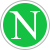
<style>
.page{position:relative;width:50px;height:50px;background:#15c142}
.page>*{position:absolute;margin:0}
.t1{font:41.7px "TimesNewRomanPSMT";letter-spacing:-0.01em;color:#ffffff}
</style>
<div class="page">
<p class="t1" style="left:9px;top:11px;width:31px;height:29px">N</p>
</div>
